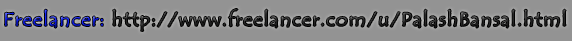
<style>
.page{position:relative;width:572px;height:41px;background:#939393}
.page>*{position:absolute;margin:0}
.t1{font:32.2px "TempusSansITC";letter-spacing:0.05em;color:#282828;scale:1.08 1}
.t2{font:32.2px "TempusSansITC";letter-spacing:0.05em;color:#0f1ff3;scale:1.08 1}
</style>
<div class="page">
<p class="t1" style="left:5px;top:9px;width:561px;height:22px"><span class="t2">Freelancer:</span> http://www.freelancer.com/u/PalashBansal.html</p>
</div>
